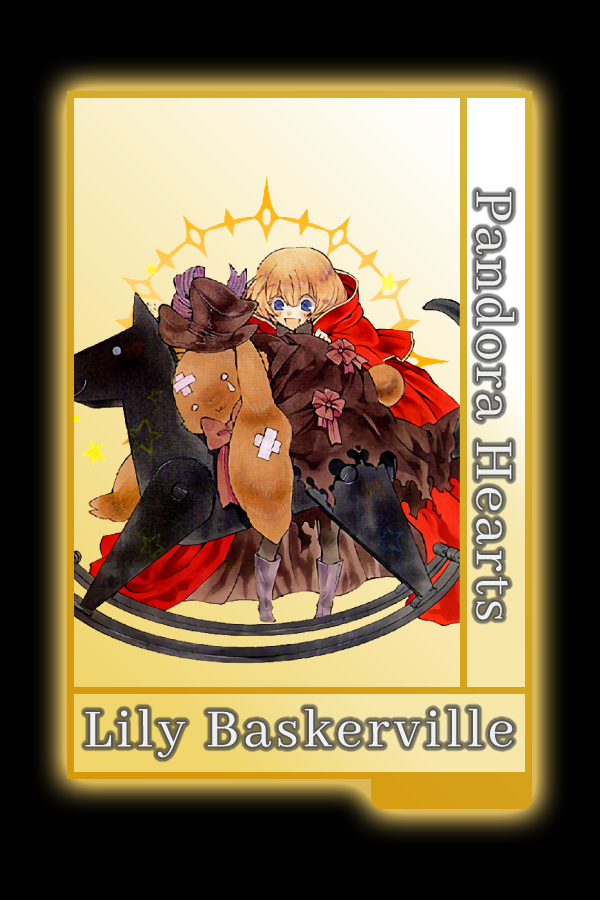
<style>
.page{position:relative;width:600px;height:900px;background:#000000}
.page>*{position:absolute;margin:0}
.t1{font:59.1px "AbhayaLibre-Regular";letter-spacing:0.072em;color:#efefef}
.t2{font:59px "AbhayaLibre-Regular";letter-spacing:0.072em;color:#efefef}
</style>
<div class="page">
<p class="t1" style="left:476px;top:192px;width:39px;height:428px;rotate:90deg">Pandora Hearts</p>
<p class="t2" style="left:85px;top:708px;width:428px;height:50px">Lily Baskerville</p>
</div>
